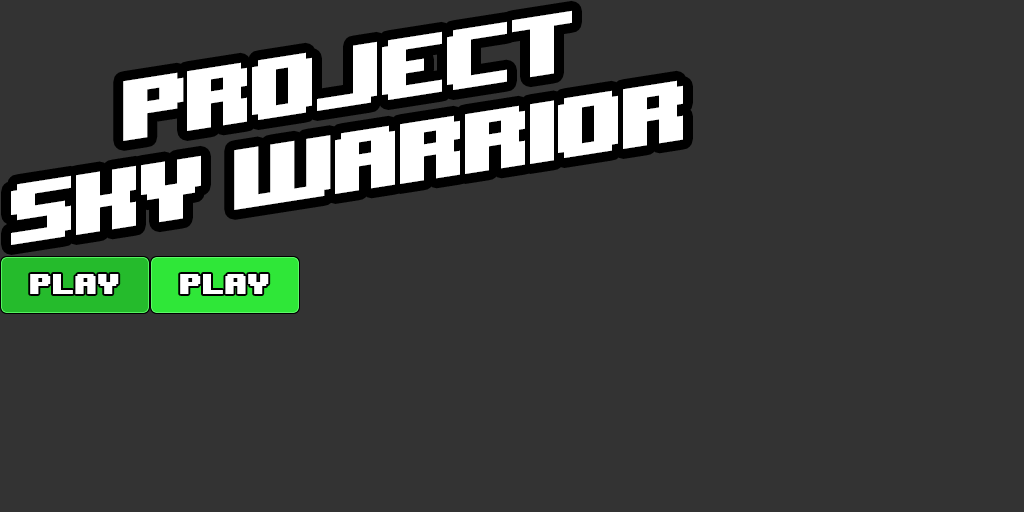
<style>
.page{position:relative;width:1024px;height:512px;background:#333333}
.page>*{position:absolute;margin:0}
.t1{font:71.8px "8BITWONDERNominal";letter-spacing:-0.1em;color:#ffffff}
.t2{font:24px "8BITWONDERNominal";letter-spacing:-0.05em;color:#ffffff}
</style>
<div class="page">
<p class="t1" style="left:11px;top:10px;width:672px;height:235px;text-align:center;rotate:-9deg">Project<br>sky Warrior</p>
<p class="t2" style="left:30px;top:274px;width:89px;height:20px">Play</p>
<p class="t2" style="left:180px;top:274px;width:89px;height:20px">Play</p>
</div>
